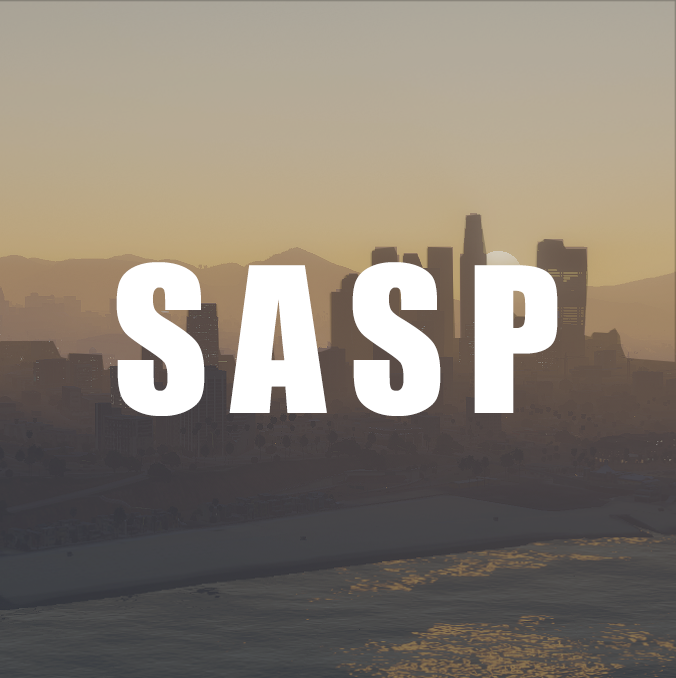
<style>
.page{position:relative;width:676px;height:678px}
.page>*{position:absolute;margin:0}
.t1{font:186.7px "Impact";letter-spacing:0.12em;color:#ffffff}
</style>
<div class="page">
<p class="t1" style="left:116px;top:262px;width:442px;height:154px">SASP</p>
</div>
